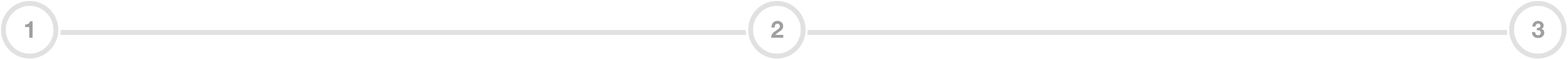
<style>
.page{position:relative;width:1568px;height:59px;background:#ffffff}
.page>*{position:absolute;margin:0}
.t1{font:23.5px "HelveticaNeue-Bold";letter-spacing:0.03em;color:#9f9f9f}
</style>
<div class="page">
<p class="t1" style="left:25px;top:21px;width:8px;height:17px">1</p>
<p class="t1" style="left:771px;top:21px;width:13px;height:17px">2</p>
<p class="t1" style="left:1532px;top:21px;width:12px;height:17px">3</p>
</div>
